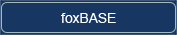
<style>
.page{position:relative;width:177px;height:35px;background:#183662}
.page>*{position:absolute;margin:0}
.t1{font:13.6px "ArialMT";color:#ffffff}
</style>
<div class="page">
<p class="t1" style="left:61px;top:13px;width:55px;height:10px">foxBASE</p>
</div>
